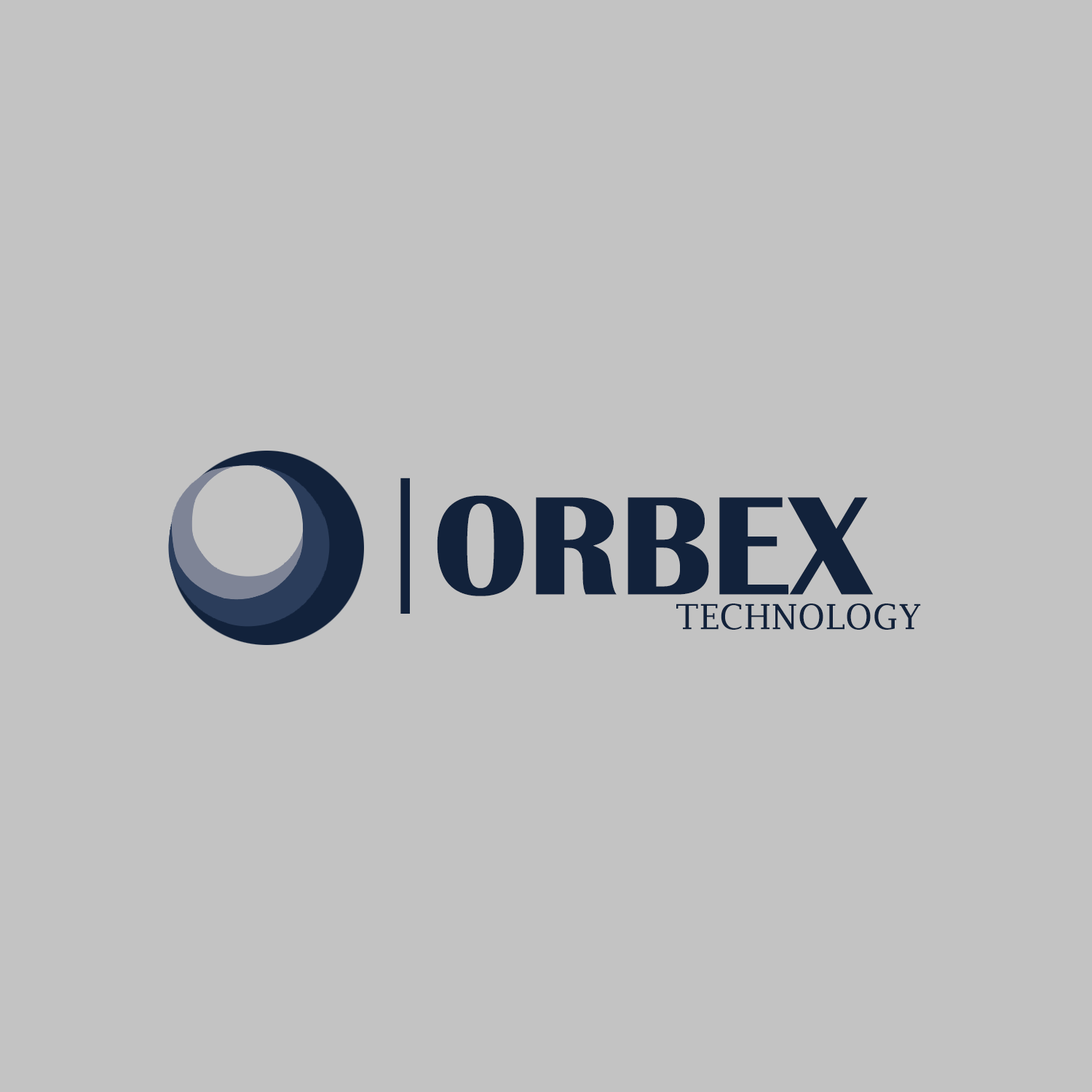
<style>
.page{position:relative;width:1092px;height:1092px;background:#c3c3c3}
.page>*{position:absolute;margin:0}
.t1{font:145.6px "AgencyFB-Reg";color:#12223b}
.t2{font:145.6px "BritannicBold";color:#12223b}
.t3{font:34.8px "LucidaFax";color:#12223b}
</style>
<div class="page">
<p class="t1" style="left:400px;top:478px;width:10px;height:136px">|</p>
<p class="t2" style="left:437px;top:495px;width:437px;height:101px">ORBEX</p>
<p class="t3" style="left:676px;top:604px;width:245px;height:26px">TECHNOLOGY</p>
</div>
